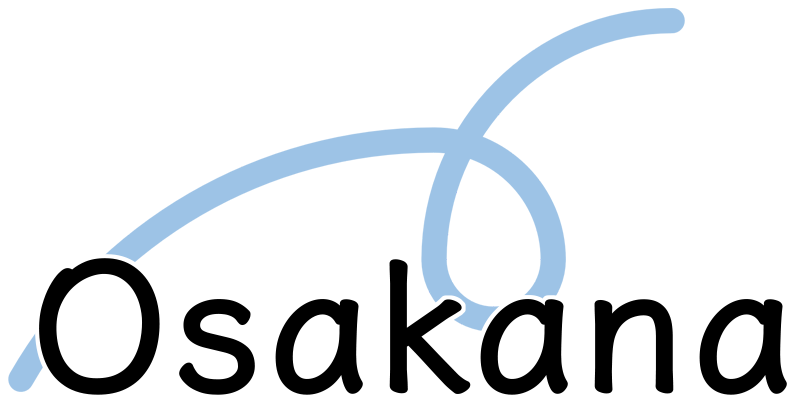
<style>
.page{position:relative;width:800px;height:400px;background:#ffffff}
.page>*{position:absolute;margin:0}
.t1{font:180px "KleeOne-SemiBold";color:#000000;font-weight:bold}
</style>
<div class="page">
<p class="t1" style="left:39px;top:258px;width:748px;height:137px">Osakana</p>
</div>
